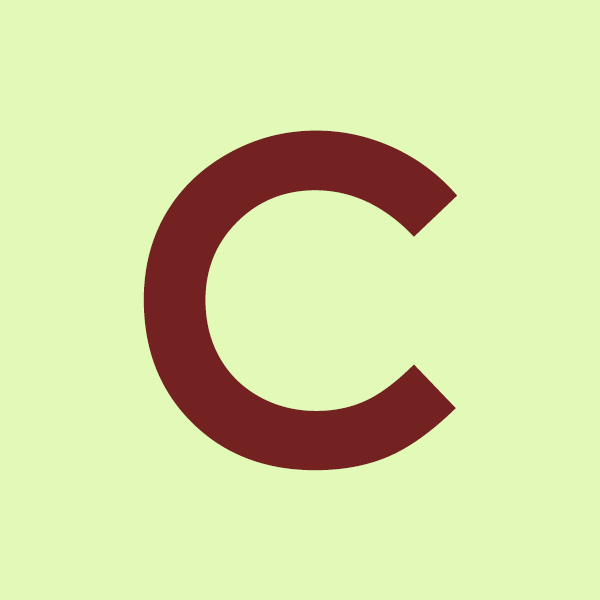
<style>
.page{position:relative;width:600px;height:600px;background:#e2f9b8}
.page>*{position:absolute;margin:0}
.t1{font:450px "CenturyGothic-Bold";color:#742121}
</style>
<div class="page">
<p class="t1" style="left:143px;top:130px;width:314px;height:341px">C</p>
</div>
